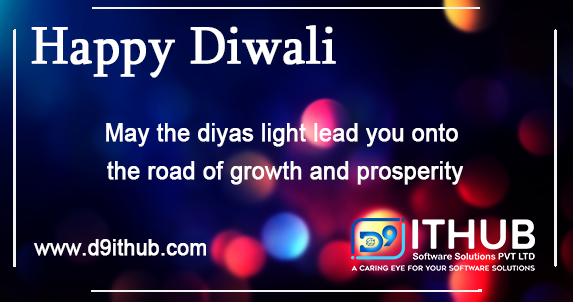
<style>
.page{position:relative;width:573px;height:302px}
.page>*{position:absolute;margin:0}
.t1{font:53.5px "Sylfaen";color:#ffffff;font-weight:bold;scale:0.93 1}
.t2{font:24.5px/37.5px "ArialMT";color:#ffffff;font-weight:bold;scale:0.93 1}
.t3{font:22.3px "ArialMT";color:#ffffff;font-weight:bold;scale:0.93 1}
</style>
<div class="page">
<p class="t1" style="left:31px;top:25px;width:305px;height:53px">Happy Diwali</p>
<p class="t2" style="left:106px;top:123px;width:357px;height:62px;text-align:center">May the diyas light lead you onto <br>the road of growth and prosperity</p>
<p class="t3" style="left:34px;top:239px;width:172px;height:17px">www.d9ithub.com</p>
</div>
